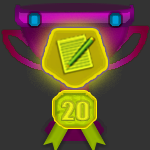
<style>
.page{position:relative;width:150px;height:150px;background:#333333}
.page>*{position:absolute;margin:0}
.t1{font:24.2px "Impact";scale:1.16 1}
</style>
<div class="page">
<p class="t1" style="left:62px;top:100px;width:28px;height:21px">20</p>
</div>
